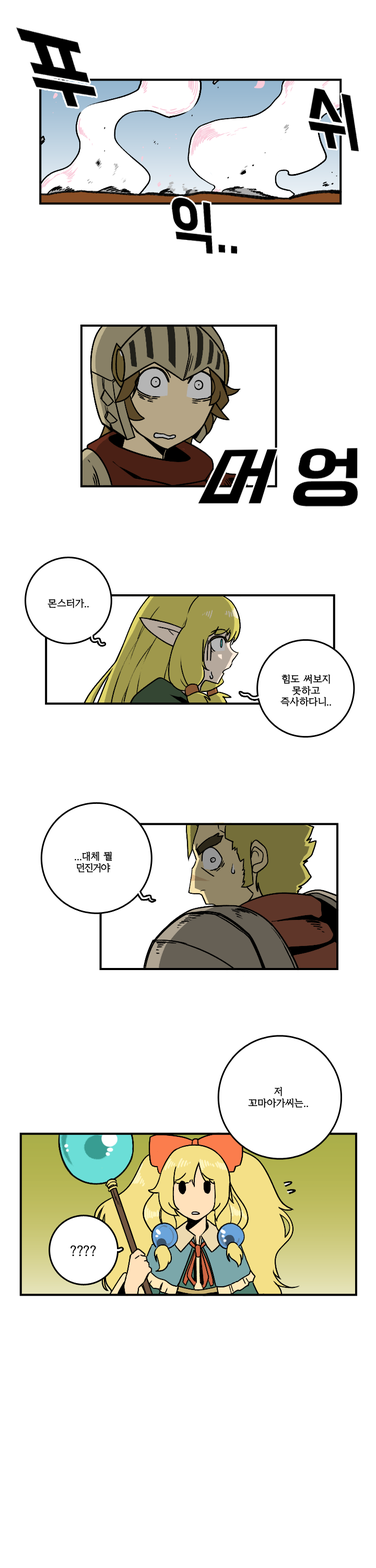
<style>
.page{position:relative;width:376px;height:1568px;background:#ffffff}
.page>*{position:absolute;margin:0}
.t1{font:9.4px "KoreanYMJ-B";color:#000000}
.t2{font:12.5px "KoreanYMJ-B";color:#000000}
</style>
<div class="page">
<p class="t1" style="left:48px;top:598px;width:41px;height:10px">몬스터가..</p>
<p class="t1" style="left:281px;top:674px;width:50px;height:33px;text-align:center">힘도 써보지<br>못하고<br>즉사하다니..</p>
<p class="t1" style="left:75px;top:851px;width:37px;height:22px;text-align:center">...대체 뭘<br>던진거야</p>
<p class="t1" style="left:248px;top:1087px;width:60px;height:21px;text-align:center">저<br>꼬마아가씨는..</p>
<p class="t2" style="left:71px;top:1245px;width:25px;height:11px">????</p>
</div>
